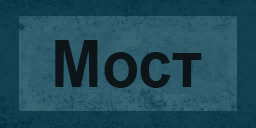
<style>
.page{position:relative;width:256px;height:128px}
.page>*{position:absolute;margin:0}
.t1{font:65.3px "Arial-BoldMT";color:#070707;scale:0.93 1}
</style>
<div class="page">
<p class="t1" style="left:55px;top:40px;width:147px;height:48px;opacity:0.9">Мост</p>
</div>
